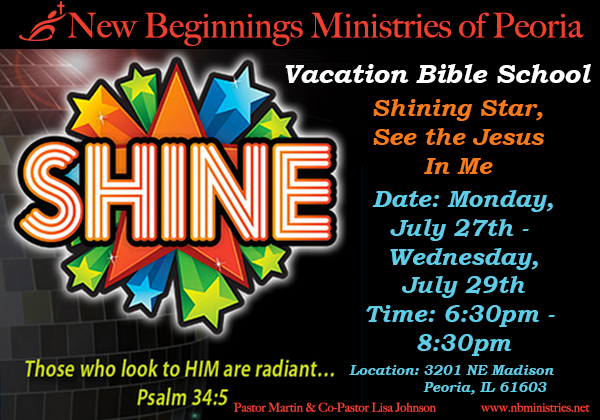
<style>
.page{position:relative;width:600px;height:420px;background:#000000}
.page>*{position:absolute;margin:0}
.t1{font:34px "BigCaslon-Medium";color:#ef3f2f}
.t2{font:26.7px "BookmanOldStyle-BoldItalic";color:#ffffff}
.t3{font:24px "BookmanOldStyle-BoldItalic";color:#f77a18}
.t4{font:24px "BookmanOldStyle-BoldItalic";color:#5ecde8}
.t5{font:14px "BookmanOldStyle-BoldItalic";color:#5ecde8}
.t6{font:12px "BigCaslon-Medium";color:#ef3f2f}
</style>
<div class="page">
<p class="t1" style="left:68px;top:12px;width:516px;height:34px">New Beginnings Ministries of Peoria</p>
<p class="t2" style="left:285px;top:64px;width:306px;height:19px">Vacation Bible School</p>
<p class="t3" style="left:373px;top:99px;width:172px;height:75px;text-align:center">Shining Star, <br>See the Jesus <br>In Me</p>
<p class="t4" style="left:366px;top:190px;width:189px;height:166px;text-align:center">Date: Monday,<br>July 27th - <br>Wednesday,<br>July 29th<br>Time: 6:30pm - <br>8:30pm</p>
<p class="t5" style="left:349px;top:365px;width:205px;height:30px;text-align:center">Location: 3201 NE Madison <br>              Peoria, IL 61603</p>
<p class="t6" style="left:233px;top:402px;width:357px;height:10px">Pastor Martin &amp; Co-Pastor Lisa Johnson                  www.nbministries.net</p>
</div>
